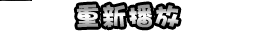
<style>
.page{position:relative;width:256px;height:32px;background:#ffffff}
.page>*{position:absolute;margin:0}
.t1{font:25.3px "DFPHaiBaoW12";letter-spacing:0.05em}
</style>
<div class="page">
<p class="t1" style="left:76px;top:4px;width:103px;height:24px">重新播放</p>
</div>
